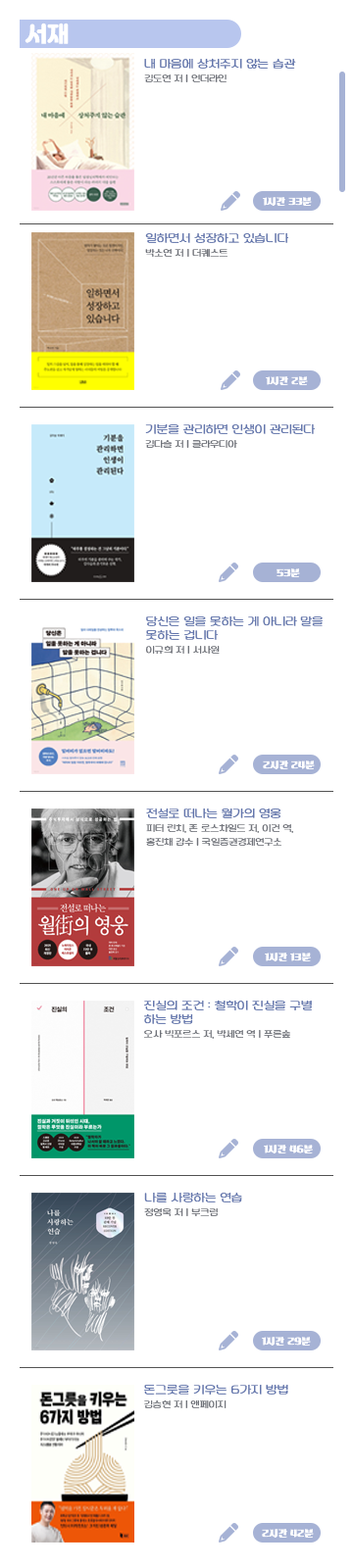
<style>
.page{position:relative;width:353px;height:1568px;background:#ffffff}
.page>*{position:absolute;margin:0}
.t1{font:21.7px "JalnanOTF";color:#ffffff}
.t2{font:13.7px/13.7px "HUReply130";color:#6376ad}
.t3{font:10.8px/13.7px "HUReply130";color:#70737a}
.t4{font:9.8px "HULifestyle180";color:#ffffff}
</style>
<div class="page">
<p class="t1" style="left:24px;top:23px;width:45px;height:21px">서재</p>
<p class="t2" style="left:144px;top:58px;width:152px;height:24px">내 마음에 상처주지 않는 습관<br><span class="t3">김도연 저 | 언더라인</span></p>
<p class="t4" style="left:263px;top:197px;width:49px;height:9px">1시간 33분</p>
<p class="t2" style="left:145px;top:232px;width:143px;height:25px">일하면서 성장하고 있습니다<br><span class="t3">박소연 저 | 더퀘스트</span></p>
<p class="t4" style="left:266px;top:376px;width:42px;height:9px">1시간 2분</p>
<p class="t2" style="left:145px;top:423px;width:170px;height:25px">기분을 관리하면 인생이 관리된다<br><span class="t3">김다슬 저 | 클라우디아</span></p>
<p class="t4" style="left:276px;top:568px;width:24px;height:9px">53분</p>
<p class="t2" style="left:146px;top:615px;width:176px;height:39px">당신은 일을 못하는 게 아니라 말을<br>못하는 겁니다<br><span class="t3">이규희 저 | 서사원</span></p>
<p class="t4" style="left:263px;top:760px;width:52px;height:9px">2시간 24분</p>
<p class="t3" style="left:146px;top:808px;width:147px;height:38px"><span class="t2">전설로 떠나는 월가의 영웅<br></span>피터 린치, 존 로스차일드 저, 이건 역,<br>홍진채 감수 | 국일증권경제연구소</p>
<p class="t4" style="left:265px;top:953px;width:46px;height:8px">1시간 13분</p>
<p class="t2" style="left:144px;top:1000px;width:168px;height:39px">진실의 조건 : 철학이 진실을 구별<br>하는 방법<br><span class="t3">오사 빅포르스 저, 박세연 역 | 푸른숲</span></p>
<p class="t4" style="left:264px;top:1145px;width:49px;height:8px">1시간 46분</p>
<p class="t3" style="left:144px;top:1192px;width:98px;height:24px"><span class="t2">나를 사랑하는 연습<br></span>정영욱 저 | 부크럼</p>
<p class="t4" style="left:262px;top:1337px;width:49px;height:9px">1시간 29분</p>
<p class="t2" style="left:144px;top:1385px;width:144px;height:23px">돈그릇을 키우는 6가지 방법<br><span class="t3">김승현 저 | 앤페이지</span></p>
<p class="t4" style="left:262px;top:1529px;width:52px;height:9px">2시간 42분</p>
</div>
